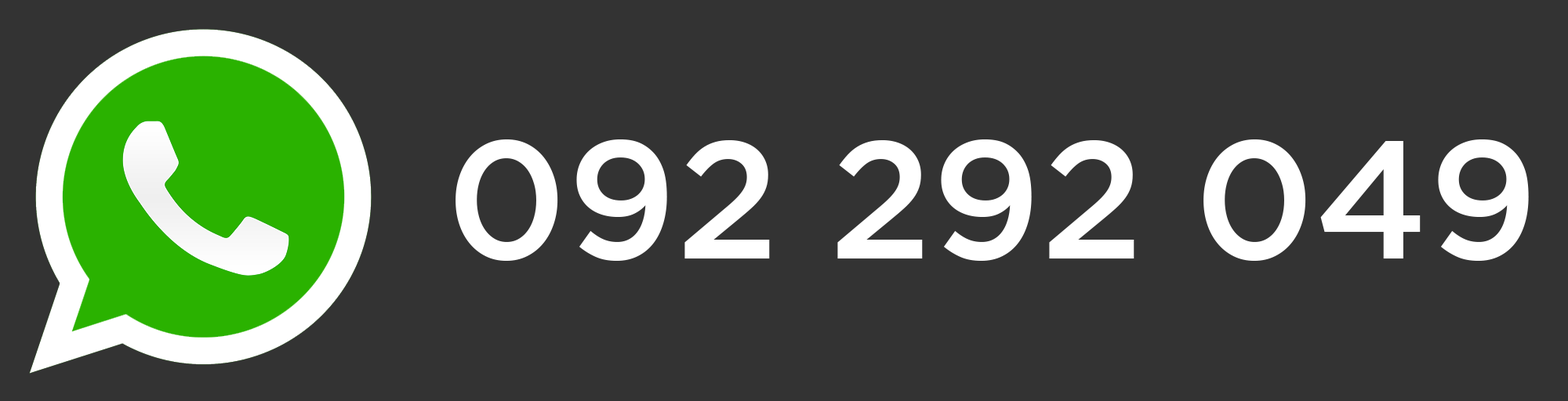
<style>
.page{position:relative;width:1568px;height:401px;background:#333333}
.page>*{position:absolute;margin:0}
.t1{font:167px "GothamMedium";color:#ffffff}
</style>
<div class="page">
<p class="t1" style="left:456px;top:140px;width:1073px;height:121px">092 292 049</p>
</div>
